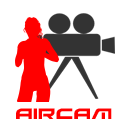
<style>
.page{position:relative;width:128px;height:128px;background:#ffffff}
.page>*{position:absolute;margin:0}
.t1{font:18px "Battlefield";color:#ff0000}
</style>
<div class="page">
<p class="t1" style="left:16px;top:108px;width:96px;height:11px">AirCam</p>
</div>
